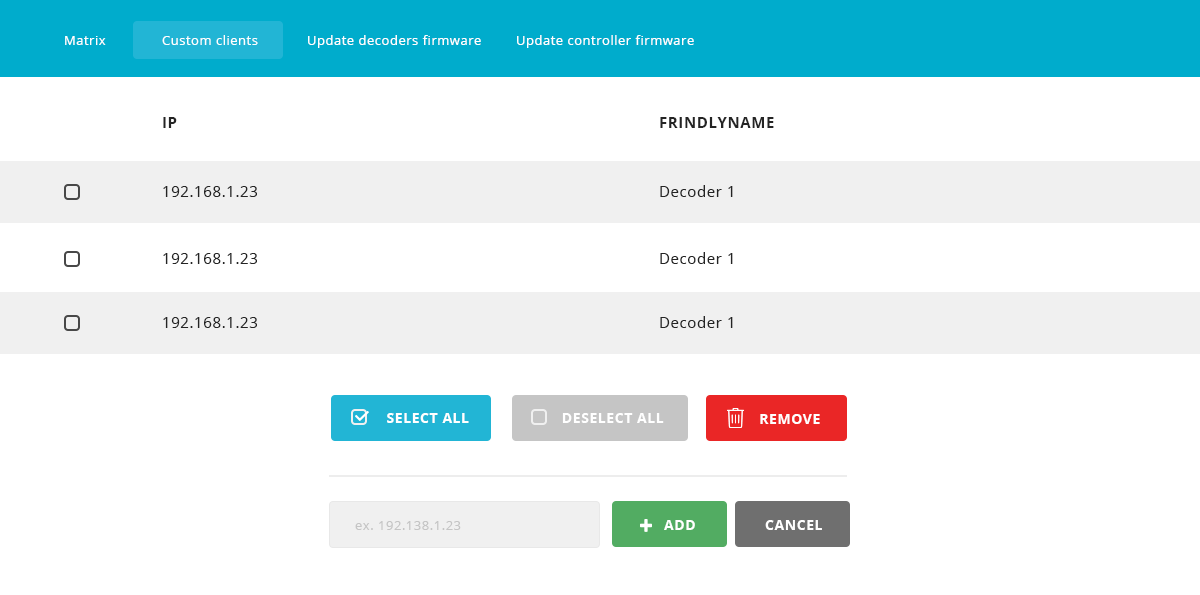
<style>
.page{position:relative;width:1200px;height:595px;background:#ffffff}
.page>*{position:absolute;margin:0}
.t1{font:13px "OpenSans";letter-spacing:0.04em;color:#ffffff}
.t2{font:15px "OpenSans-Bold";letter-spacing:0.04em;color:#242424;text-transform:uppercase}
.t3{font:15px "OpenSans";letter-spacing:0.04em;color:#242424}
.t4{font:14px "OpenSans-Bold";letter-spacing:0.04em;color:#ffffff;text-transform:uppercase}
.t5{font:13px "OpenSans";letter-spacing:0.04em;color:#c5c5c5}
</style>
<div class="page">
<p class="t1" style="left:65px;top:36px;width:41px;height:9px">Matrix</p>
<p class="t1" style="left:162px;top:35px;width:96px;height:10px">Custom clients</p>
<p class="t1" style="left:308px;top:35px;width:173px;height:13px">Update decoders firmware</p>
<p class="t1" style="left:517px;top:35px;width:177px;height:13px">Update controller firmware</p>
<p class="t2" style="left:163px;top:117px;width:14px;height:11px">Ip</p>
<p class="t2" style="left:660px;top:117px;width:114px;height:11px">FrindlyName</p>
<p class="t3" style="left:660px;top:185px;width:73px;height:12px">Decoder 1</p>
<p class="t3" style="left:163px;top:186px;width:94px;height:11px">192.168.1.23</p>
<p class="t3" style="left:163px;top:253px;width:94px;height:11px">192.168.1.23</p>
<p class="t3" style="left:660px;top:252px;width:73px;height:12px">Decoder 1</p>
<p class="t3" style="left:163px;top:317px;width:94px;height:11px">192.168.1.23</p>
<p class="t3" style="left:660px;top:316px;width:73px;height:12px">Decoder 1</p>
<p class="t4" style="left:387px;top:413px;width:82px;height:10px">select All</p>
<p class="t4" style="left:562px;top:413px;width:102px;height:10px">Deselect All</p>
<p class="t4" style="left:760px;top:414px;width:60px;height:10px">Remove</p>
<p class="t5" style="left:355px;top:521px;width:106px;height:9px">ex. 192.138.1.23</p>
<p class="t4" style="left:664px;top:520px;width:31px;height:10px">Add</p>
<p class="t4" style="left:765px;top:520px;width:57px;height:10px">canceL</p>
</div>
